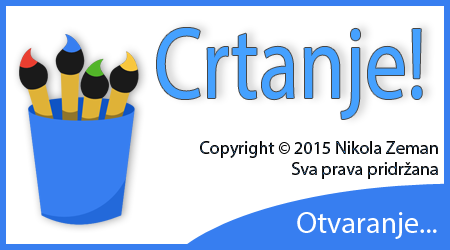
<style>
.page{position:relative;width:450px;height:250px;background:#ffffff}
.page>*{position:absolute;margin:0}
.t1{font:102.3px "MyriadPro-Regular";color:#45a1ff;scale:0.81 1}
.t2{font:18px "MyriadPro-Regular"}
.t3{font:30px "MyriadPro-Regular";color:#ffffff}
</style>
<div class="page">
<p class="t1" style="left:157px;top:28px;width:265px;height:91px">Crtanje!</p>
<p class="t2" style="left:200px;top:141px;width:238px;height:38px;text-align:right">Copyright © 2015 Nikola Zeman<br>Sva prava pridržana</p>
<p class="t3" style="left:297px;top:212px;width:140px;height:27px">Otvaranje...</p>
</div>
